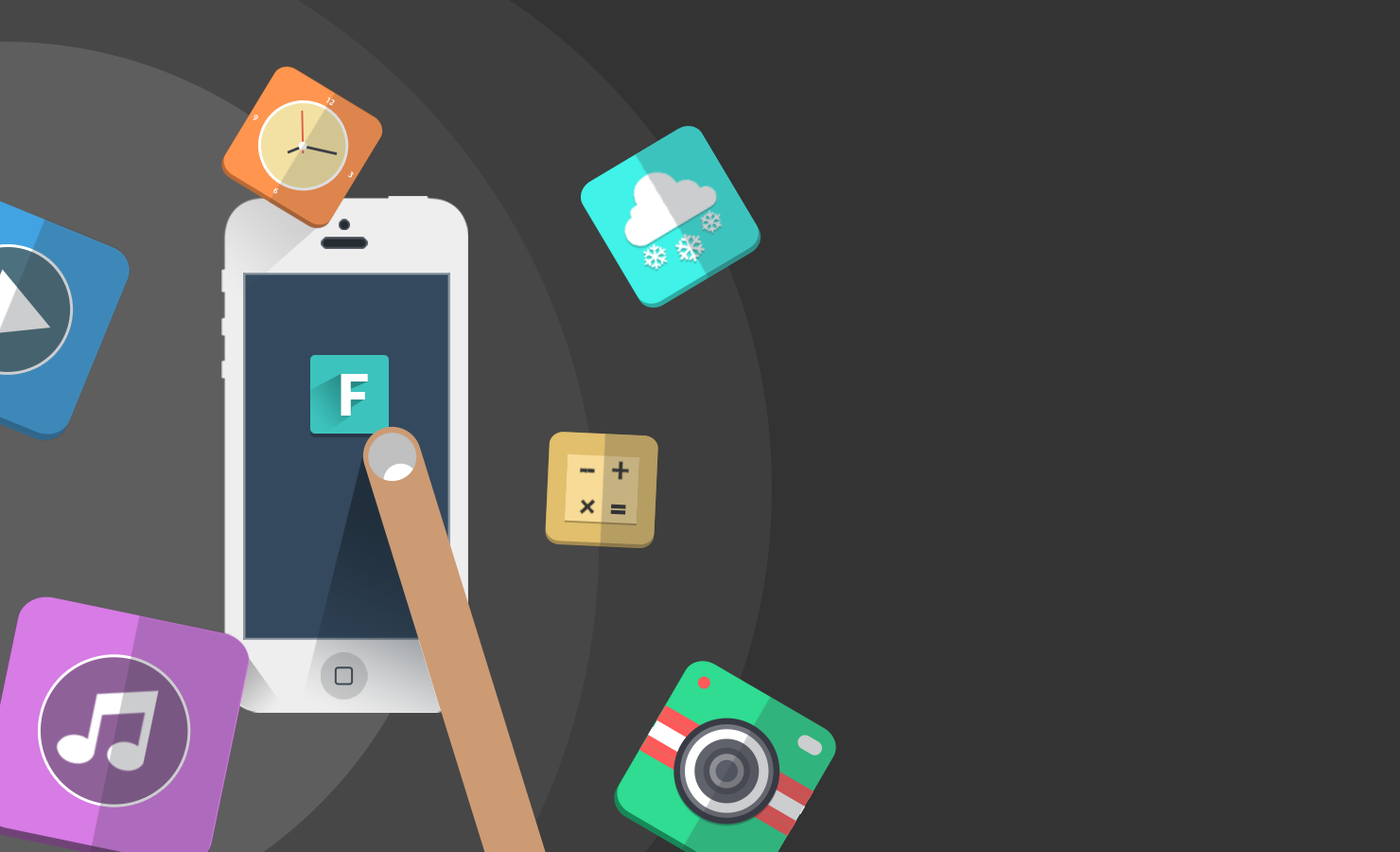
<style>
.page{position:relative;width:1400px;height:852px;background:#333333}
.page>*{position:absolute;margin:0}
.t1{font:8.1px "MyriadPro-Regular";color:#ffffff}
.t2{font:56.8px "Lato-Black";color:#ffffff}
.t3{font:36.9px "ProximaNova-Extrabld";color:#323232}
.t4{font:30.8px "ProximaNova-Extrabld";color:#323232}
</style>
<div class="page">
<p class="t1" style="left:326px;top:97px;width:9px;height:9px;rotate:31deg">12</p>
<p class="t1" style="left:252px;top:114px;width:6px;height:7px;rotate:31deg">9</p>
<p class="t1" style="left:347px;top:170px;width:7px;height:8px;rotate:31deg">3</p>
<p class="t1" style="left:272px;top:187px;width:7px;height:7px;rotate:31deg">6</p>
<p class="t2" style="left:341px;top:374px;width:27px;height:41px">F</p>
<p class="t3" style="left:610px;top:460px;width:20px;height:21px;rotate:3deg">+</p>
<p class="t4" style="left:579px;top:466px;width:10px;height:8px;rotate:3deg">-</p>
<p class="t4" style="left:586px;top:466px;width:10px;height:9px;rotate:3deg">-</p>
<p class="t3" style="left:577px;top:498px;width:20px;height:18px;rotate:48deg">+</p>
</div>
